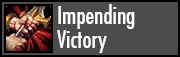
<style>
.page{position:relative;width:180px;height:57px;background:#4c4c4c}
.page>*{position:absolute;margin:0}
.t1{font:24px/24px "FuturaCondensed";color:#ffffff}
</style>
<div class="page">
<p class="t1" style="left:57px;top:4px;width:78px;height:49px;text-align:right">Impending<br>Victory</p>
</div>
